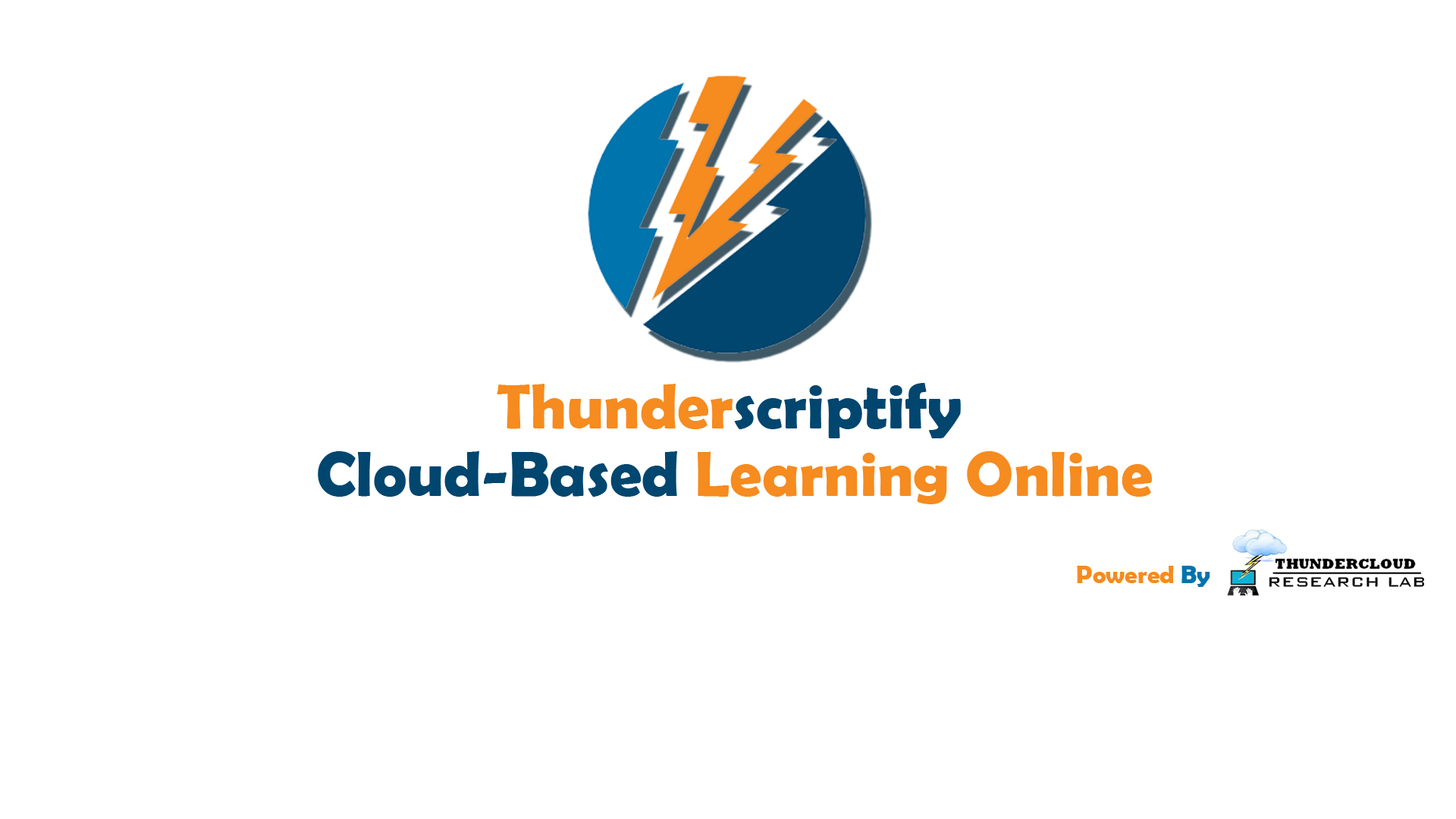
<style>
.page{position:relative;width:1456px;height:819px;background:#ffffff}
.page>*{position:absolute;margin:0}
.t1{font:63.9px "BerlinSansFBDemi-Bold";color:#00466f}
.t2{font:63.9px "BerlinSansFBDemi-Bold";color:#f68b1f}
.t3{font:25.2px "BerlinSansFBDemi-Bold";color:#f68b1f}
.t4{font:25.2px "BerlinSansFBDemi-Bold";color:#0074ad}
</style>
<div class="page">
<p class="t1" style="left:497px;top:383px;width:464px;height:55px"><span class="t2">Thunder</span>scriptify</p>
<p class="t2" style="left:318px;top:451px;width:834px;height:53px"><span class="t1">Cloud-Based</span> Learning Online</p>
<p class="t3" style="left:1077px;top:566px;width:133px;height:21px">Powered <span class="t4">By</span></p>
</div>
